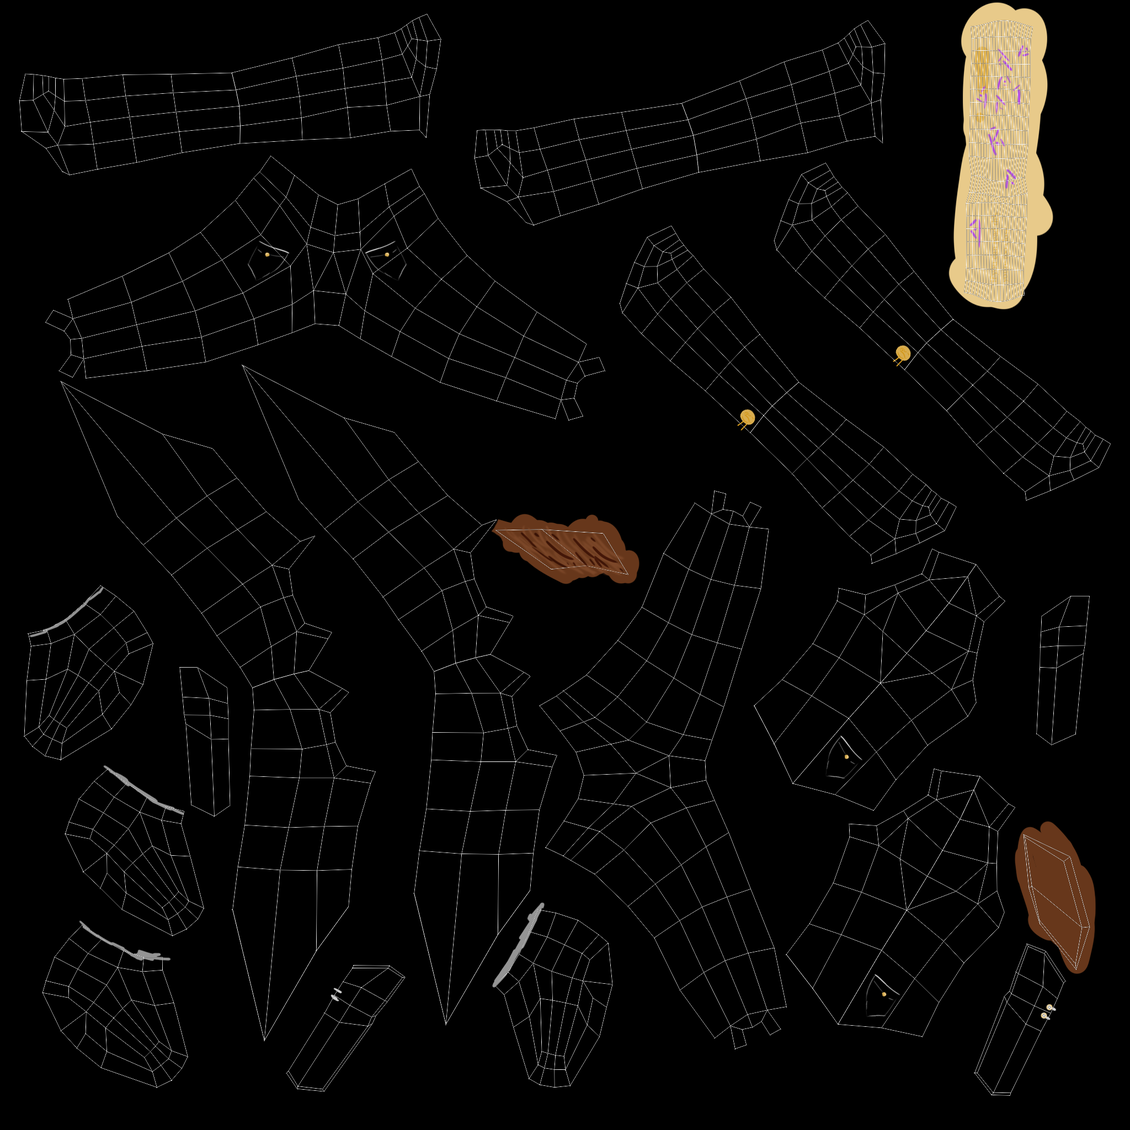
<style>
.page{position:relative;width:1130px;height:1130px;background:#000000}
.page>*{position:absolute;margin:0}
.t1{font:9px "Athelas-Regular";color:#e2b450}
</style>
<div class="page">
<p class="t1" style="left:990px;top:212px;width:20px;height:71px;rotate:-89deg">if you can read this<br>youre too close</p>
</div>
